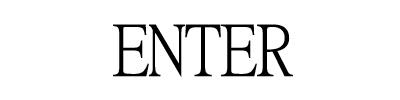
<style>
.page{position:relative;width:400px;height:100px;background:#ffffff}
.page>*{position:absolute;margin:0}
.t1{font:72px "MingLiU";color:#000000}
</style>
<div class="page">
<p class="t1" style="left:113px;top:24px;width:180px;height:53px">ENTER</p>
</div>
